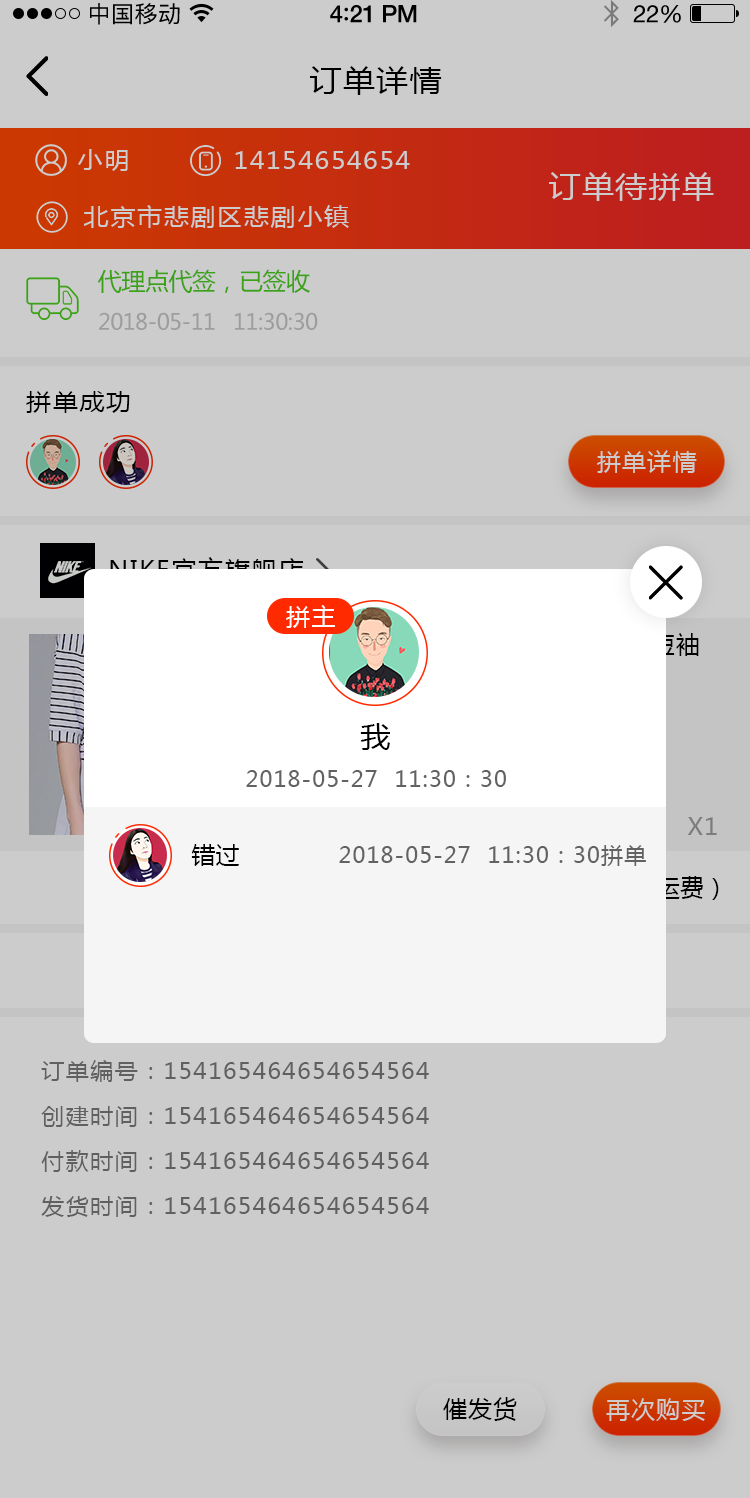
<style>
.page{position:relative;width:750px;height:1498px;background:#cccccc}
.page>*{position:absolute;margin:0}
.t1{font:23px "PingFangSC-Regular";letter-spacing:0.02em;color:#000000}
.t2{font:24px "HelveticaNeue-Medium";letter-spacing:-0.02em;color:#000000}
.t3{font:26px "Avenir-Medium";letter-spacing:-0.02em;color:#000000}
.t4{font:24px "HelveticaNeue";letter-spacing:-0.02em;color:#000000}
.t5{font:30px "MicrosoftYaHei";letter-spacing:0.05em;color:#000000;scale:1.06 1}
.t6{font:24px "MicrosoftYaHei";letter-spacing:0.05em;color:#cccccc;scale:1.06 1}
.t7{font:30px "MicrosoftYaHei";letter-spacing:0.05em;color:#cccccc;scale:1.06 1}
.t8{font:24px "MicrosoftYaHei";letter-spacing:-0.02em;color:#3ba217}
.t9{font:22px "MicrosoftYaHei";letter-spacing:-0.02em;color:#9d9d9d}
.t10{font:24px "MicrosoftYaHei";letter-spacing:0.05em;color:#000000;scale:1.06 1}
.t11{font:24px "MicrosoftYaHei";letter-spacing:0.05em;color:#cccccc;text-transform:uppercase}
.t12{font:24px "MicrosoftYaHei";letter-spacing:0.05em;scale:1.06 1}
.t13{font:24px "MicrosoftYaHei";letter-spacing:0.06em;color:#ffffff;text-transform:uppercase}
.t14{font:30px "MicrosoftYaHei";letter-spacing:0.05em;color:#000000;text-transform:uppercase}
.t15{font:22px "MicrosoftYaHei";letter-spacing:0.05em;color:#626262;text-transform:uppercase}
.t16{font:24px "MicrosoftYaHei";letter-spacing:0.06em;color:#7c7c7c;text-transform:uppercase}
.t17{font:24px "MicrosoftYaHei";color:#000000;text-transform:uppercase}
.t18{font:24px "MicrosoftYaHei";color:#f5f5f5;text-transform:uppercase}
.t19{font:30px "MicrosoftYaHei";color:#f5f5f5;text-transform:uppercase}
.t20{font:22px "MicrosoftYaHei";letter-spacing:0.05em;color:#787878;scale:1.06 1}
.t21{font:24px "MicrosoftYaHei";letter-spacing:0.05em;color:#000000;text-transform:uppercase}
</style>
<div class="page">
<p class="t1" style="left:90px;top:3px;width:90px;height:22px">中国移动</p>
<p class="t2" style="left:330px;top:5px;width:87px;height:18px">4<span class="t3">:</span>21 PM</p>
<p class="t4" style="left:633px;top:5px;width:48px;height:18px">22%</p>
<p class="t5" style="left:310px;top:66px;width:132px;height:29px">订单详情</p>
<p class="t6" style="left:78px;top:149px;width:50px;height:22px">小明</p>
<p class="t6" style="left:235px;top:151px;width:175px;height:18px">14154654654</p>
<p class="t7" style="left:549px;top:172px;width:165px;height:29px">订单待拼单</p>
<p class="t6" style="left:83px;top:205px;width:266px;height:23px">北京市悲剧区悲剧小镇</p>
<p class="t8" style="left:98px;top:269px;width:212px;height:24px">代理点代签，已签收</p>
<p class="t9" style="left:99px;top:312px;width:116px;height:18px">2018-05-11</p>
<p class="t9" style="left:235px;top:312px;width:83px;height:18px">11:30:30</p>
<p class="t10" style="left:26px;top:391px;width:104px;height:22px">拼单成功</p>
<p class="t11" style="left:597px;top:450px;width:100px;height:23px">拼单详情</p>
<p class="t12" style="left:110px;top:557px;width:193px;height:25px">NIKE官方旗舰店</p>
<p class="t13" style="left:286px;top:605px;width:49px;height:23px">拼主</p>
<p class="t14" style="left:360px;top:723px;width:30px;height:27px">我</p>
<p class="t15" style="left:246px;top:770px;width:131px;height:17px">2018-05-27</p>
<p class="t15" style="left:396px;top:770px;width:110px;height:17px">11:30：30</p>
<p class="t16" style="left:687px;top:817px;width:30px;height:18px">x1</p>
<p class="t17" style="left:191px;top:844px;width:48px;height:22px">错过</p>
<p class="t15" style="left:339px;top:846px;width:131px;height:17px">2018-05-27</p>
<p class="t15" style="left:489px;top:845px;width:157px;height:21px">11:30：30拼单</p>
<p class="t18" style="left:460px;top:873px;width:259px;height:27px">实付：￥<span class="t19">599</span>（免运费）</p>
<p class="t20" style="left:41px;top:1060px;width:388px;height:22px">订单编号：154165464654654564</p>
<p class="t20" style="left:41px;top:1106px;width:388px;height:21px">创建时间：154165464654654564</p>
<p class="t20" style="left:41px;top:1150px;width:388px;height:22px">付款时间：154165464654654564</p>
<p class="t20" style="left:41px;top:1196px;width:388px;height:21px">发货时间：154165464654654564</p>
<p class="t21" style="left:443px;top:1397px;width:74px;height:24px">催发货</p>
<p class="t11" style="left:606px;top:1398px;width:99px;height:23px">再次购买</p>
</div>
